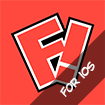
<style>
.page{position:relative;width:105px;height:105px;background:#ff493f}
.page>*{position:absolute;margin:0}
.t1{font:10.6px "CCWildWordsRoman";letter-spacing:-0.003em;color:#ffffff}
</style>
<div class="page">
<p class="t1" style="left:60px;top:61px;width:35px;height:36px;rotate:-45deg">For iOS</p>
</div>
